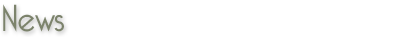
<style>
.page{position:relative;width:400px;height:37px;background:#ffffff}
.page>*{position:absolute;margin:0}
.t1{font:36.8px "BelleroseLight";color:#7c836c}
</style>
<div class="page">
<p class="t1" style="left:3px;top:4px;width:61px;height:28px">News</p>
</div>
